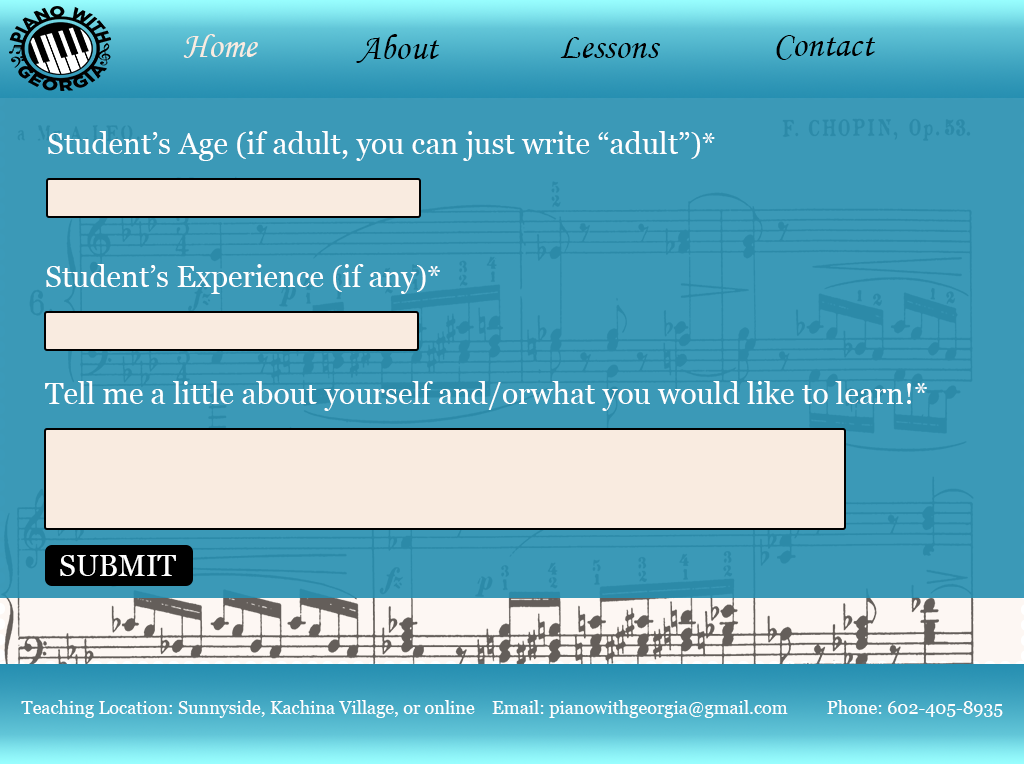
<style>
.page{position:relative;width:1024px;height:764px;background:#3b99b7}
.page>*{position:absolute;margin:0}
.t1{font:36px "MonotypeCorsiva";color:#f9ebe0}
.t2{font:36px "MonotypeCorsiva";color:#000000}
.t3{font:30px "Georgia";color:#ffffff}
.t4{font:18px "Georgia";color:#ffffff}
</style>
<div class="page">
<p class="t1" style="left:183px;top:34px;width:75px;height:24px">Home</p>
<p class="t2" style="left:356px;top:34px;width:84px;height:29px">About</p>
<p class="t2" style="left:560px;top:37px;width:100px;height:21px">Lessons</p>
<p class="t2" style="left:776px;top:35px;width:99px;height:25px">Contact</p>
<p class="t3" style="left:48px;top:131px;width:667px;height:30px">Student’s Age (if adult, you can just write “adult”)*</p>
<p class="t3" style="left:46px;top:264px;width:394px;height:30px">Student’s Experience (if any)*</p>
<p class="t3" style="left:45px;top:381px;width:882px;height:30px">Tell me a little about yourself and/orwhat you would like to learn!*</p>
<p class="t3" style="left:60px;top:555px;width:116px;height:21px">SUBMIT</p>
<p class="t4" style="left:21px;top:700px;width:982px;height:18px">Teaching Location: Sunnyside, Kachina Village, or online    Email: pianowithgeorgia@gmail.com         Phone: 602-405-8935</p>
</div>
